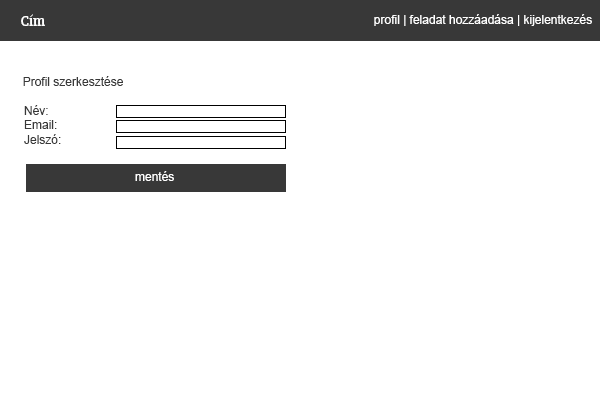
<style>
.page{position:relative;width:600px;height:400px;background:#ffffff}
.page>*{position:absolute;margin:0}
.t1{font:14px "BreeSerif-Regular";color:#ffffff}
.t2{font:12px "ArialMT";color:#ffffff}
.t3{font:12px "ArialMT";color:#383838}
</style>
<div class="page">
<p class="t1" style="left:21px;top:14px;width:24px;height:12px">Cím</p>
<p class="t2" style="left:374px;top:14px;width:218px;height:12px">profil | feladat hozzáadása | kijelentkezés</p>
<p class="t3" style="left:23px;top:76px;width:100px;height:10px">Profil szerkesztése</p>
<p class="t3" style="left:24px;top:105px;width:37px;height:39px">Név:<br>Email:<br>Jelszó:</p>
<p class="t2" style="left:135px;top:171px;width:39px;height:10px">mentés</p>
</div>
